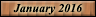
<style>
.page{position:relative;width:96px;height:17px;background:#000000}
.page>*{position:absolute;margin:0}
.t1{font:12px "TimesNewRomanPS-BoldItalicMT";color:#000000}
</style>
<div class="page">
<p class="t1" style="left:13px;top:3px;width:70px;height:12px">January 2016</p>
</div>
